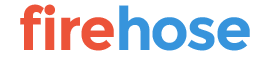
<style>
.page{position:relative;width:273px;height:58px;background:#ffffff}
.page>*{position:absolute;margin:0}
.t1{font:60px "Montserrat-Bold";letter-spacing:-0.01em;color:#ec5339}
.t2{font:60px "Montserrat-Bold";letter-spacing:-0.01em;color:#3794dc}
</style>
<div class="page">
<p class="t1" style="left:20px;top:4px;width:230px;height:47px">fire<span class="t2">hose</span></p>
</div>
